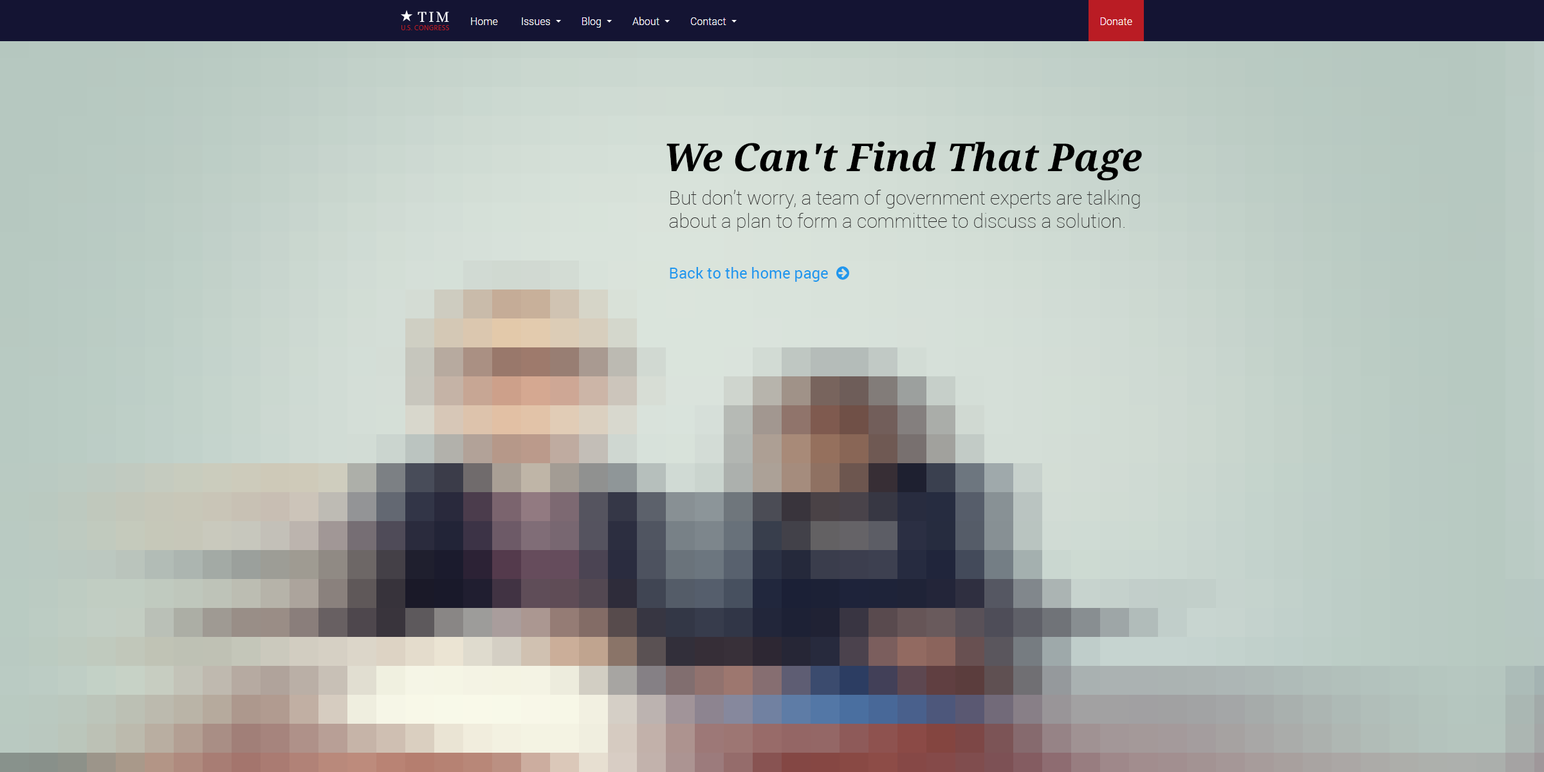
<style>
.page{position:relative;width:1544px;height:772px}
.page>*{position:absolute;margin:0}
.t1{font:38.6px "DroidSerif-BoldItalic";color:#000000}
.t2{font:19.3px "Roboto-Thin";color:#262525}
</style>
<div class="page">
<p class="t1" style="left:667px;top:141px;width:475px;height:40px">We Can't Find That Page</p>
<p class="t2" style="left:669px;top:190px;width:471px;height:42px">But don’t worry, a team of government experts are talking about a plan to form a committee to discuss a solution.</p>
</div>
